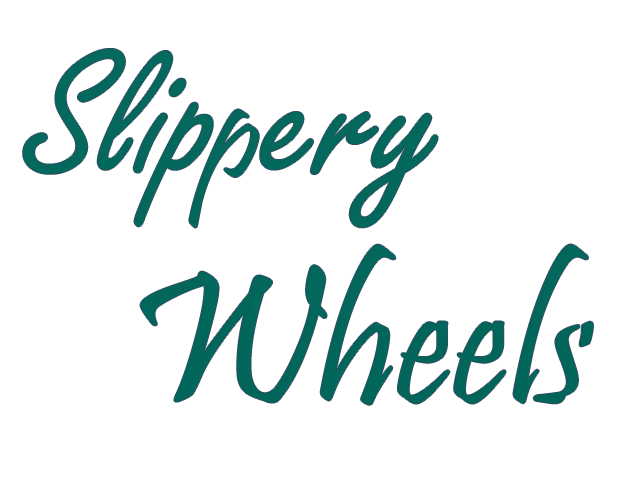
<style>
.page{position:relative;width:640px;height:480px;background:#ffffff}
.page>*{position:absolute;margin:0}
.t1{font:192px "FreestyleScript-Regular";color:#00695c}
.t2{font:128px "Pristina-Regular";color:#00695c}
.t3{font:192px "Pristina-Regular";color:#00695c}
</style>
<div class="page">
<p class="t1" style="left:23px;top:49px;width:415px;height:179px">Slip ery</p>
<p class="t2" style="left:189px;top:109px;width:70px;height:119px;rotate:6deg">p</p>
<p class="t3" style="left:140px;top:244px;width:453px;height:161px">Wheels</p>
</div>
